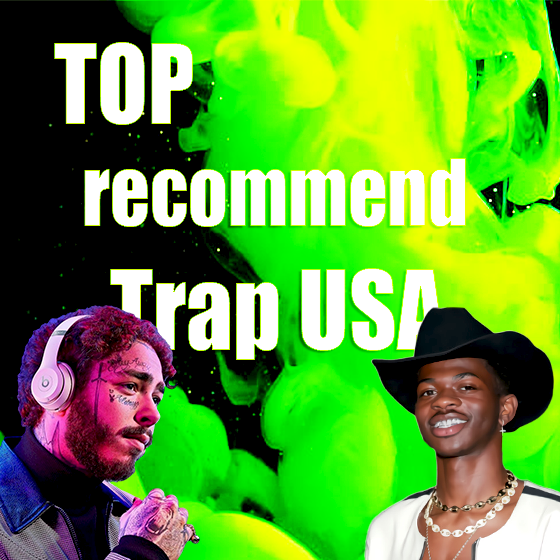
<style>
.page{position:relative;width:560px;height:560px}
.page>*{position:absolute;margin:0}
.t1{font:85.6px "Impact";color:#ffffff;scale:0.91 1}
.t2{font:102.8px "Impact";color:#ffffff;scale:0.91 1}
.t3{font:61.7px "Impact";color:#ffffff;scale:0.91 1}
</style>
<div class="page">
<p class="t1" style="left:54px;top:42px;width:412px;height:318px"><span class="t2">TOP<br> </span>recommend<br>  <span class="t2">Trap USA</span><span class="t3">.</span></p>
</div>
